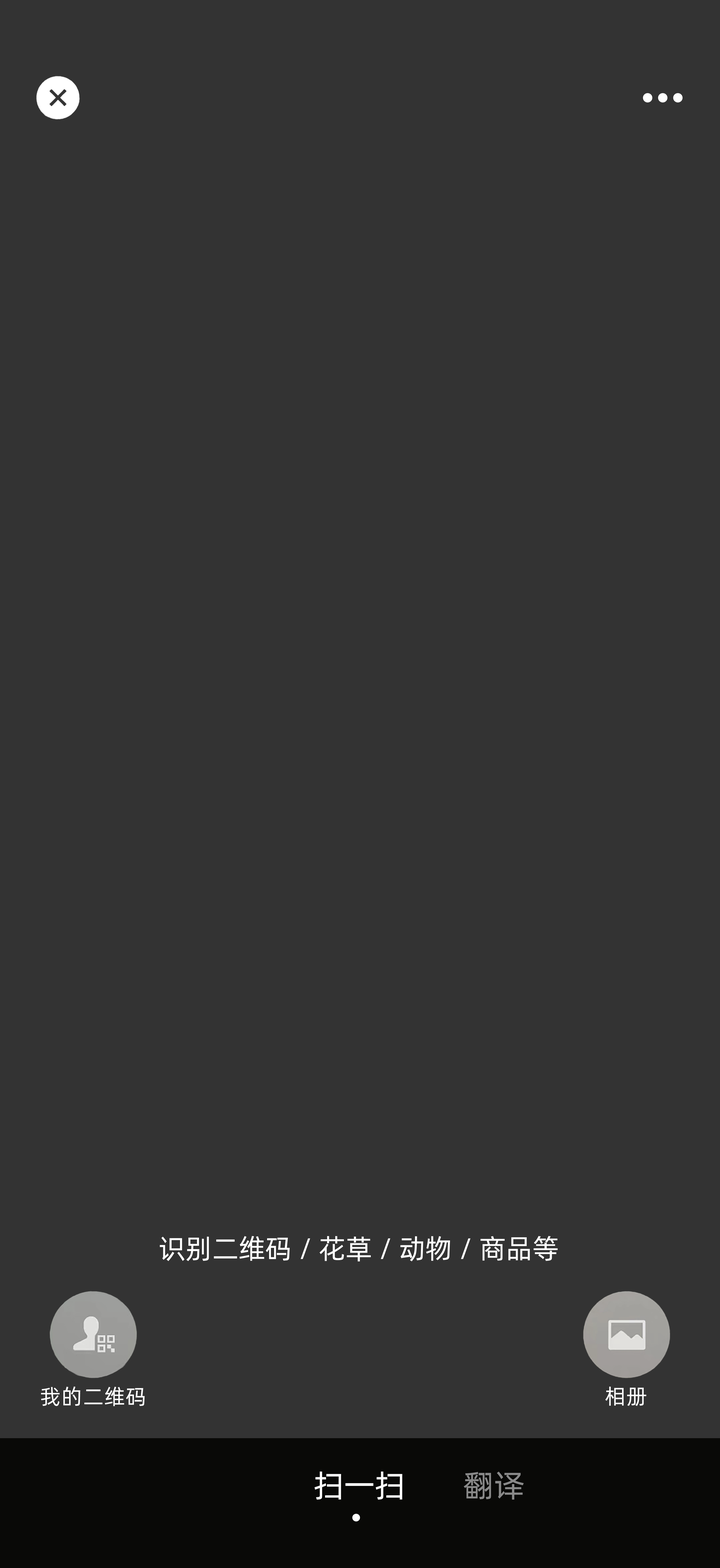
<style>
.page{position:relative;width:720px;height:1568px;background:#333333}
.page>*{position:absolute;margin:0}
.t1{font:27.3px "Alibaba-PuHuiTi-R";letter-spacing:-0.01em;color:#ffffff}
.t2{font:21.3px "Alibaba-PuHuiTi-R";letter-spacing:0.02em;color:#ffffff}
.t3{font:31.3px "Alibaba-PuHuiTi-R";letter-spacing:-0.01em;color:#ffffff}
.t4{font:31.3px "Alibaba-PuHuiTi-R";letter-spacing:-0.01em;color:#898989}
</style>
<div class="page">
<p class="t1" style="left:160px;top:1236px;width:398px;height:26px">识别二维码 / 花草 / 动物 / 商品等</p>
<p class="t2" style="left:41px;top:1386px;width:104px;height:20px">我的二维码</p>
<p class="t2" style="left:605px;top:1387px;width:41px;height:19px">相册</p>
<p class="t3" style="left:314px;top:1471px;width:88px;height:29px">扫一扫</p>
<p class="t4" style="left:464px;top:1472px;width:60px;height:28px">翻译</p>
</div>
